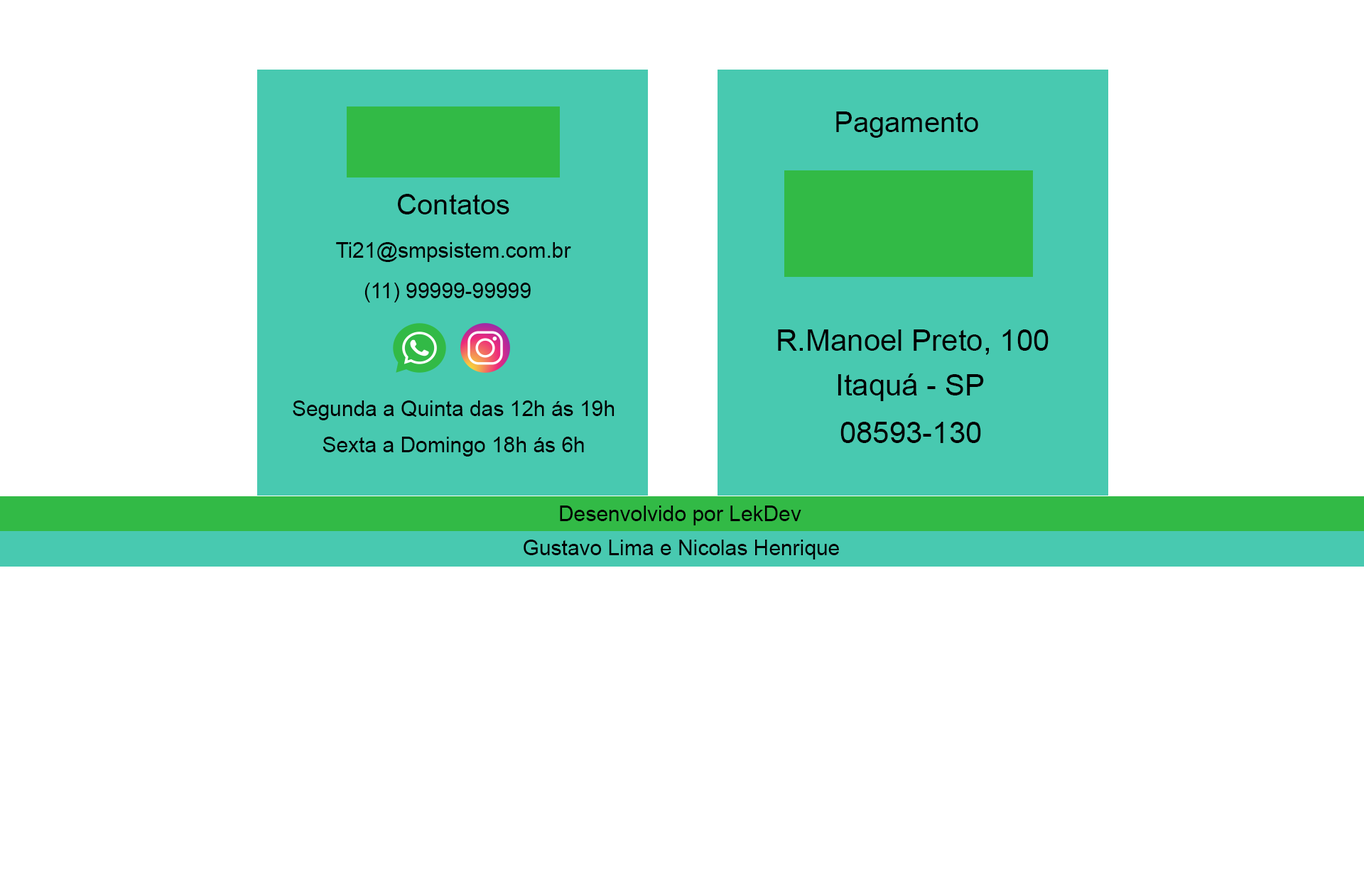
<style>
.page{position:relative;width:1364px;height:874px;background:#ffffff}
.page>*{position:absolute;margin:0}
.t1{font:28.4px "ArialMT";color:#000000}
.t2{font:21.3px "ArialMT";color:#000000}
.t3{font:29.8px "ArialMT";color:#000000}
</style>
<div class="page">
<p class="t1" style="left:836px;top:112px;width:142px;height:26px">Pagamento</p>
<p class="t1" style="left:398px;top:194px;width:111px;height:21px">Contatos</p>
<p class="t2" style="left:336px;top:242px;width:235px;height:20px">Ti21@smpsistem.com.br</p>
<p class="t2" style="left:364px;top:283px;width:167px;height:20px">(11) 99999-99999</p>
<p class="t3" style="left:778px;top:330px;width:270px;height:25px">R.Manoel Preto, 100</p>
<p class="t3" style="left:837px;top:374px;width:147px;height:27px">Itaquá - SP</p>
<p class="t2" style="left:293px;top:401px;width:321px;height:19px">Segunda a Quinta das 12h ás 19h</p>
<p class="t3" style="left:840px;top:422px;width:141px;height:21px">08593-130</p>
<p class="t2" style="left:322px;top:437px;width:262px;height:20px">Sexta a Domingo 18h ás 6h</p>
<p class="t2" style="left:560px;top:506px;width:241px;height:20px">Desenvolvido por LekDev</p>
<p class="t2" style="left:523px;top:540px;width:316px;height:20px">Gustavo Lima e Nicolas Henrique</p>
</div>
